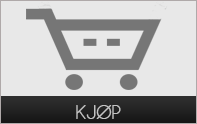
<style>
.page{position:relative;width:197px;height:124px;background:#e8e8e8}
.page>*{position:absolute;margin:0}
.t1{font:18px "Comfortaa-Light";color:#c3c3c3}
</style>
<div class="page">
<p class="t1" style="left:76px;top:105px;width:45px;height:14px">KJØP</p>
</div>
